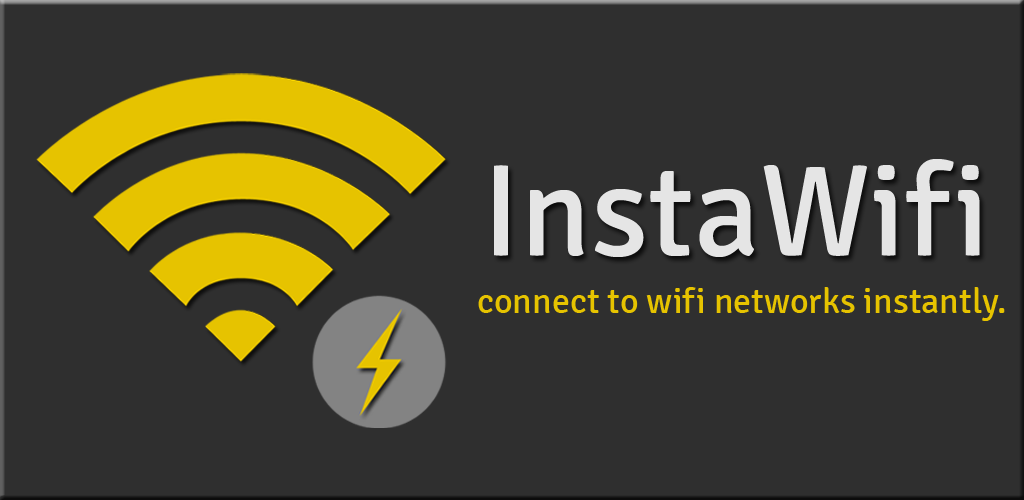
<style>
.page{position:relative;width:1024px;height:500px;background:#2f2f2f}
.page>*{position:absolute;margin:0}
.t1{font:130px "Signika-Regular";color:#e5e5e5}
.t2{font:36px "Signika-Regular";color:#e6c300}
</style>
<div class="page">
<p class="t1" style="left:494px;top:159px;width:486px;height:98px">InstaWifi</p>
<p class="t2" style="left:478px;top:287px;width:527px;height:34px">connect to wifi networks instantly.</p>
</div>
